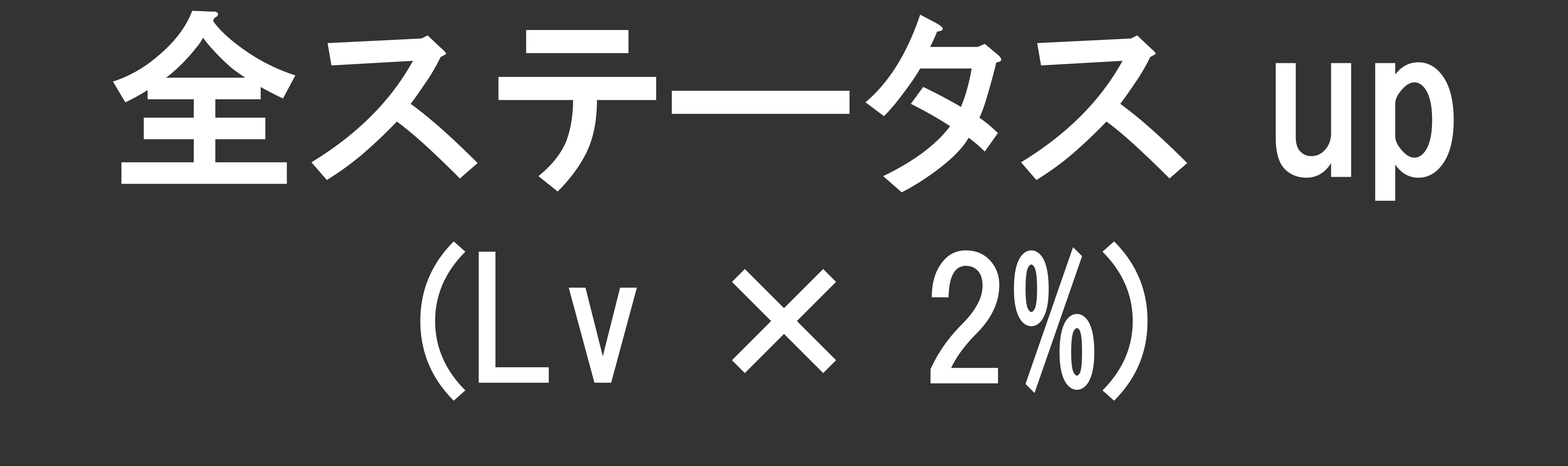
<style>
.page{position:relative;width:1568px;height:466px;background:#333333}
.page>*{position:absolute;margin:0}
.t1{font:197px "HGPGothicE";color:#ffffff}
.t2{font:164.4px "HGPGothicE";color:#ffffff}
</style>
<div class="page">
<p class="t1" style="left:113px;top:11px;width:1341px;height:190px">全ステータス up</p>
<p class="t2" style="left:420px;top:241px;width:728px;height:160px">(Lv × 2%)</p>
</div>
